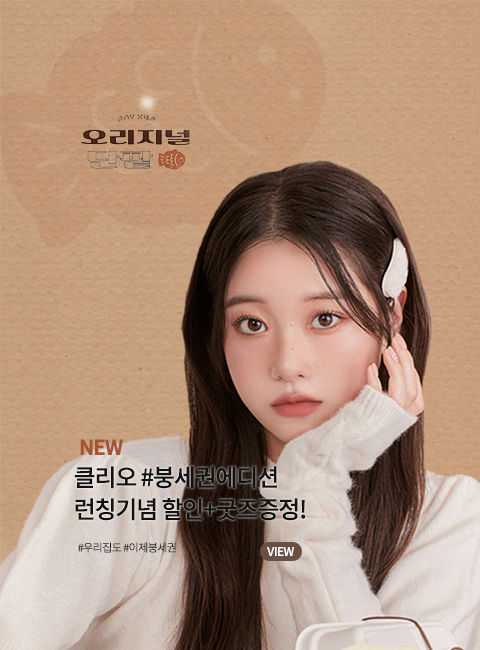
<style>
.page{position:relative;width:480px;height:650px}
.page>*{position:absolute;margin:0}
.t1{font:20px "NotoSansKR-Medium";letter-spacing:-0.05em;color:#a65334;font-weight:bold}
.t2{font:24px/32px "NotoSansKR-Medium";letter-spacing:-0.05em;color:#121212}
.t3{font:11px "NotoSansKR-Light";letter-spacing:-0.05em;color:#151515}
.t4{font:12px "NotoSansKR-Medium";letter-spacing:-0.05em;color:#ffffff}
</style>
<div class="page">
<p class="t1" style="left:80px;top:439px;width:43px;height:16px">NEW</p>
<p class="t2" style="left:74px;top:466px;width:232px;height:55px">클리오 #붕세권에디션<br>런칭기념 할인+굿즈증정!</p>
<p class="t3" style="left:78px;top:542px;width:98px;height:11px">#우리집도 #이제붕세권</p>
<p class="t4" style="left:267px;top:547px;width:27px;height:9px">VIEW</p>
</div>
